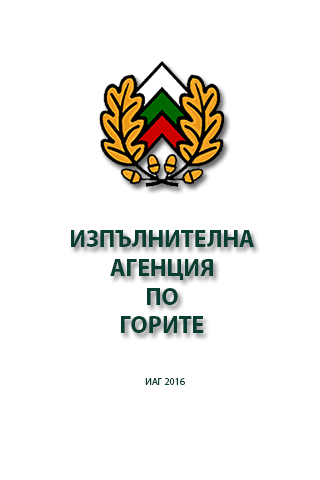
<style>
.page{position:relative;width:320px;height:480px;background:#ffffff}
.page>*{position:absolute;margin:0}
.t1{font:24px "MyriadPro-Bold";color:#093e33}
.t2{font:10px "MyriadPro-Regular";color:#093e33}
</style>
<div class="page">
<p class="t1" style="left:71px;top:230px;width:183px;height:103px;text-align:center">ИЗПЪЛНИТЕЛНА<br>АГЕНЦИЯ<br>ПО<br>ГОРИТЕ</p>
<p class="t2" style="left:145px;top:378px;width:40px;height:7px">ИАГ 2016</p>
</div>
